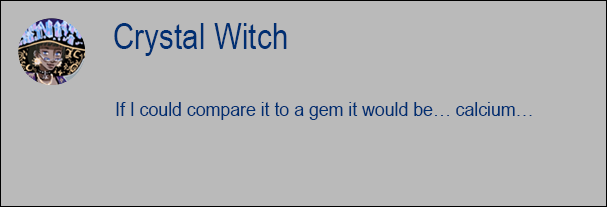
<style>
.page{position:relative;width:607px;height:207px;background:#bababa}
.page>*{position:absolute;margin:0}
.t1{font:36.3px "ArialNarrow";color:#002f72}
.t2{font:20.5px "ArialNarrow";color:#002f72;scale:1.05 1}
</style>
<div class="page">
<p class="t1" style="left:114px;top:23px;width:173px;height:33px">Crystal Witch</p>
<p class="t2" style="left:116px;top:102px;width:416px;height:18px">If I could compare it to a gem it would be… calcium…</p>
</div>
